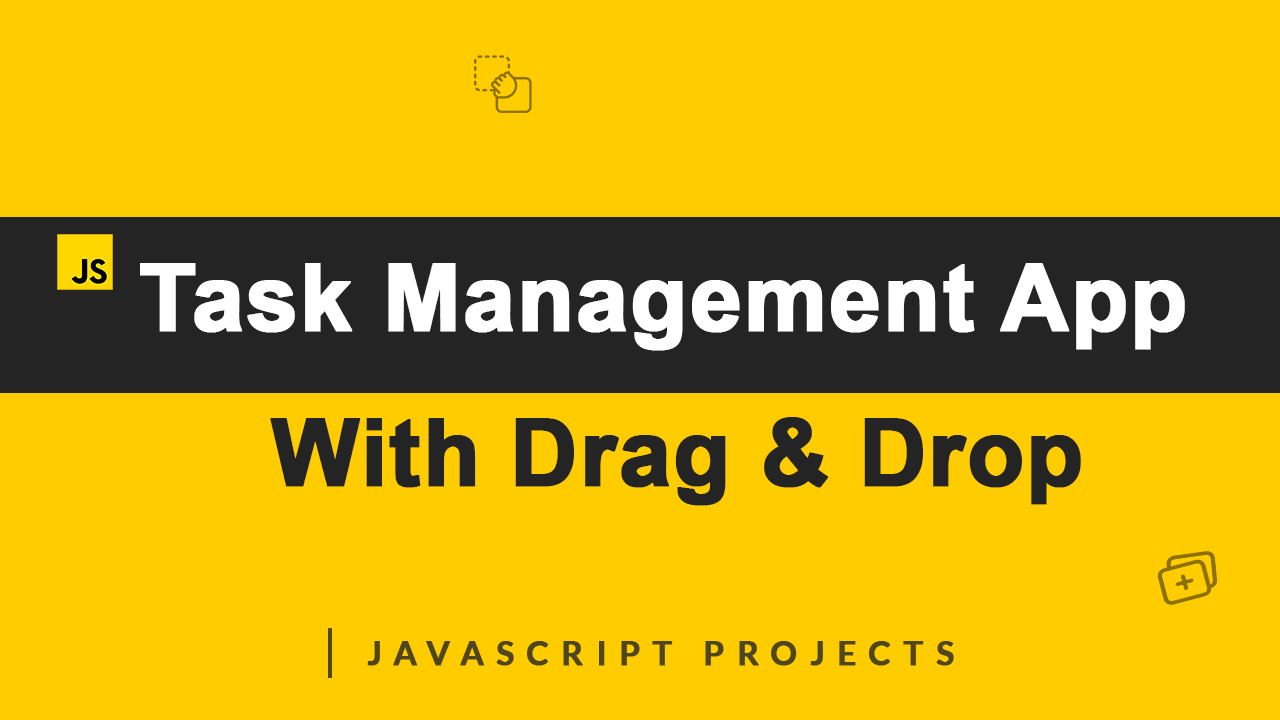
<style>
.page{position:relative;width:1280px;height:720px;background:#ffcc00}
.page>*{position:absolute;margin:0}
.t1{font:93px/154.9px "Arial-BoldMT";color:#ffffff;font-weight:bold}
.t2{font:93px/154.9px "Arial-BoldMT";color:#242424;font-weight:bold}
.t3{font:33.3px "Lato-Bold";letter-spacing:0.35em;color:#50461d;text-transform:uppercase;font-weight:bold}
</style>
<div class="page">
<p class="t1" style="left:140px;top:263px;width:1045px;height:243px;text-align:center">Task Management App <br><span class="t2">With Drag &amp; Drop</span></p>
<p class="t3" style="left:367px;top:641px;width:587px;height:25px">Javascript Projects</p>
</div>
